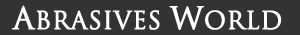
<style>
.page{position:relative;width:300px;height:35px;background:#333333}
.page>*{position:absolute;margin:0}
.t1{font:24px "TrajanPro-Regular";color:#ffffff;font-weight:bold}
.t2{font:30px "TrajanPro-Regular";color:#ffffff;font-weight:bold}
</style>
<div class="page">
<p class="t1" style="left:11px;top:5px;width:271px;height:25px"><span class="t2">A</span>BRASIVES <span class="t2">W</span>ORLD</p>
</div>
